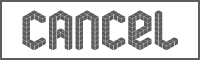
<style>
.page{position:relative;width:200px;height:60px;background:#ffffff}
.page>*{position:absolute;margin:0}
.t1{font:72px "soma";color:#5c5c5c}
</style>
<div class="page">
<p class="t1" style="left:22px;top:10px;width:156px;height:40px">cancel</p>
</div>
